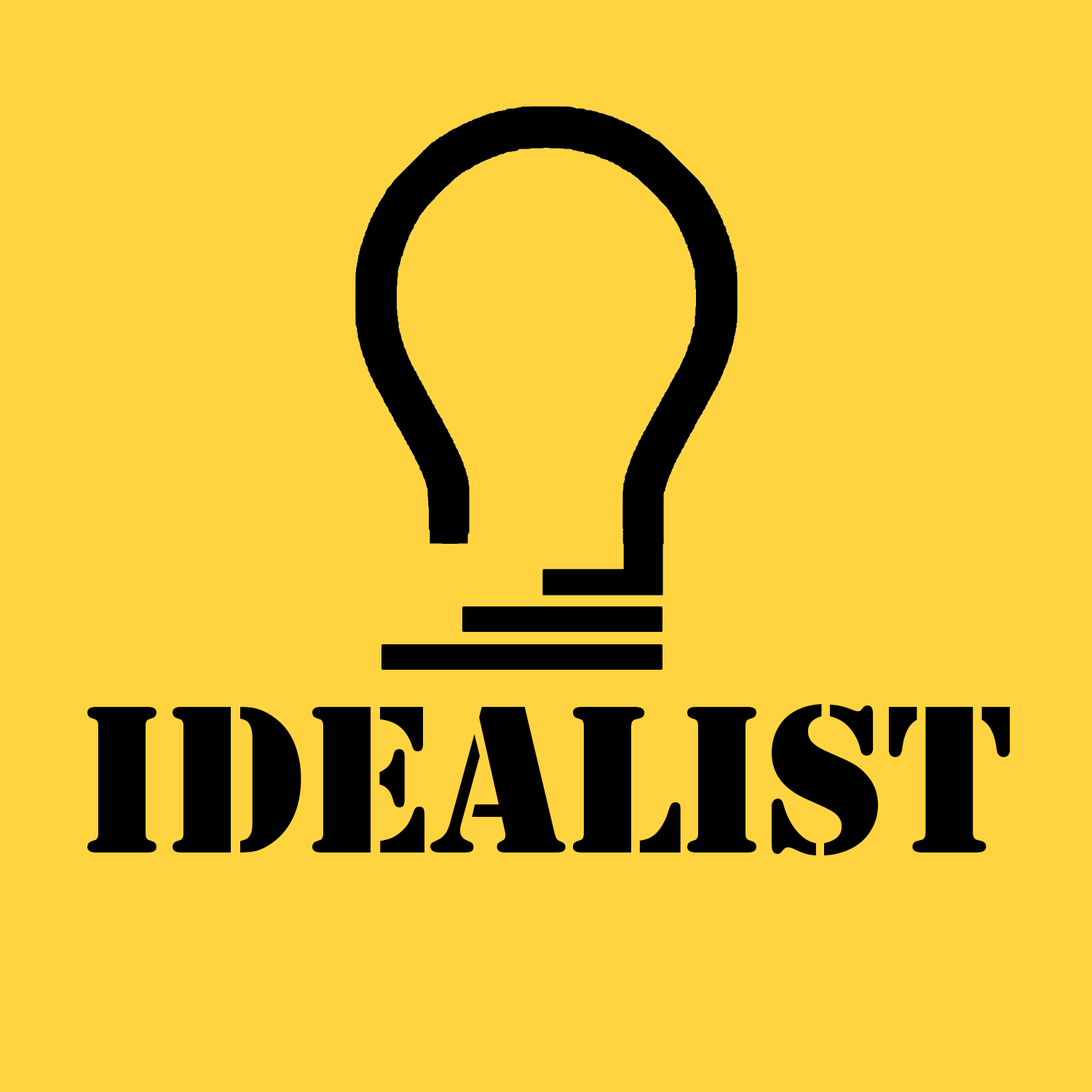
<style>
.page{position:relative;width:1092px;height:1092px;background:#ffd440}
.page>*{position:absolute;margin:0}
.t1{font:218.4px "Stencil";letter-spacing:-0.007em;color:#000000}
</style>
<div class="page">
<p class="t1" style="left:87px;top:704px;width:923px;height:151px">IDEALIST</p>
</div>
